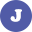
<style>
.page{position:relative;width:32px;height:32px;background:#515ba7}
.page>*{position:absolute;margin:0}
.t1{font:18px "CooperBlack";color:#ffffff}
</style>
<div class="page">
<p class="t1" style="left:10px;top:9px;width:12px;height:13px">J</p>
</div>
